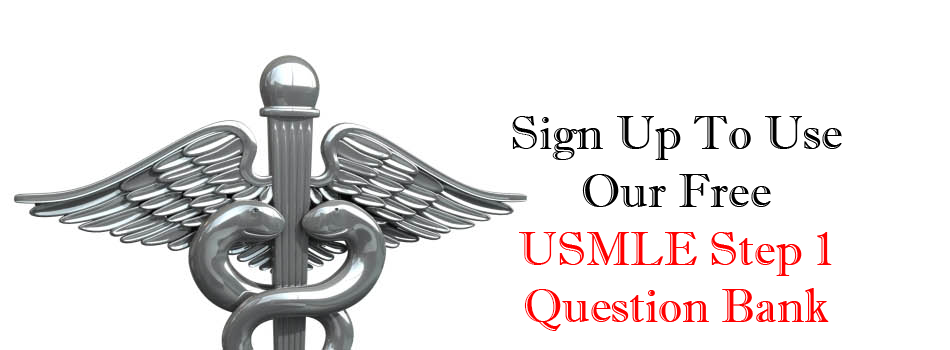
<style>
.page{position:relative;width:950px;height:350px;background:#ffffff}
.page>*{position:absolute;margin:0}
.t1{font:48px "ImprintMT-Shadow";color:#ff0000}
.t2{font:48px "ImprintMT-Shadow";color:#000000}
</style>
<div class="page">
<p class="t1" style="left:512px;top:116px;width:330px;height:215px;text-align:center"><span class="t2">Sign Up To Use Our Free<br></span>USMLE Step 1 Question Bank</p>
</div>
